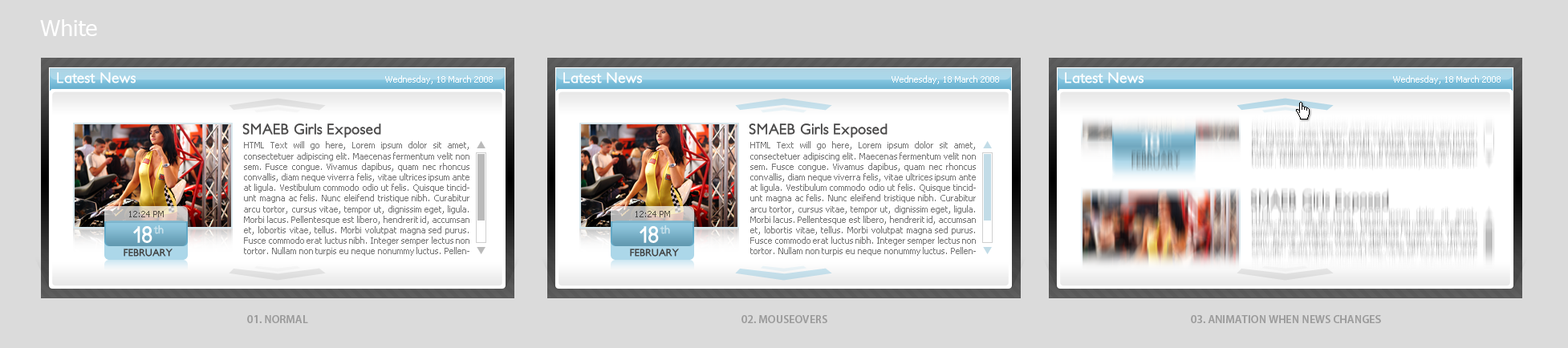
<style>
.page{position:relative;width:1568px;height:348px;background:#dbdbdb}
.page>*{position:absolute;margin:0}
.t1{font:22.5px "Tahoma";color:#ffffff}
.t2{font:14.4px "PetitaBold";color:#ffffff}
.t3{font:8.8px "Tahoma";color:#ffffff}
.t4{font:14.4px "PetitaBold";color:#494848}
.t5{font:8.8px "Tahoma";color:#777777}
.t6{font:8.8px "Tahoma";color:#564f47}
.t7{font:22.5px "PetitaBold";color:#ffffff}
.t8{font:11.2px "PetitaBold";color:#c9e1eb}
.t9{font:9.6px "PetitaBold";color:#3d3d3d}
.t10{font:11.2px "MyriadPro-Semibold";color:#9a9a9a}
</style>
<div class="page">
<p class="t1" style="left:40px;top:19px;width:57px;height:17px">White</p>
<p class="t2" style="left:57px;top:72px;width:79px;height:11px">Latest News</p>
<p class="t3" style="left:385px;top:75px;width:108px;height:9px">Wednesday, 18 March 2008</p>
<p class="t2" style="left:563px;top:72px;width:79px;height:11px">Latest News</p>
<p class="t3" style="left:892px;top:75px;width:107px;height:9px">Wednesday, 18 March 2008</p>
<p class="t2" style="left:1065px;top:72px;width:79px;height:11px">Latest News</p>
<p class="t3" style="left:1393px;top:75px;width:108px;height:9px">Wednesday, 18 March 2008</p>
<p class="t4" style="left:242px;top:124px;width:139px;height:14px">SMAEB Girls Exposed</p>
<p class="t4" style="left:749px;top:124px;width:139px;height:14px">SMAEB Girls Exposed</p>
<p class="t5" style="left:244px;top:141px;width:225px;height:115px;text-align:justify">HTML Text will go here, Lorem ipsum dolor sit amet, consectetuer adipiscing elit. Maecenas fermentum velit non sem. Fusce congue. Vivamus dapibus, quam nec rhoncus convallis, diam neque viverra felis, vitae ultrices ipsum ante at ligula. Vestibulum commodo odio ut felis. Quisque tincidunt magna ac felis. Nunc eleifend tristique nibh. Curabitur arcu tortor, cursus vitae, tempor ut, dignissim eget, ligula. Morbi lacus. Pellentesque est libero, hendrerit id, accumsan et, lobortis vitae, tellus. Morbi volutpat magna sed purus. Fusce commodo erat luctus nibh. Integer semper lectus non tortor. Nullam non turpis eu neque nonummy luctus. Pellentesque lobortis, eros eu tristique fringilla, nibh lectus mattis elit, eget lacinia justo sapien id nibh.</p>
<p class="t5" style="left:750px;top:141px;width:226px;height:115px;text-align:justify">HTML Text will go here, Lorem ipsum dolor sit amet, consectetuer adipiscing elit. Maecenas fermentum velit non sem. Fusce congue. Vivamus dapibus, quam nec rhoncus convallis, diam neque viverra felis, vitae ultrices ipsum ante at ligula. Vestibulum commodo odio ut felis. Quisque tincidunt magna ac felis. Nunc eleifend tristique nibh. Curabitur arcu tortor, cursus vitae, tempor ut, dignissim eget, ligula. Morbi lacus. Pellentesque est libero, hendrerit id, accumsan et, lobortis vitae, tellus. Morbi volutpat magna sed purus. Fusce commodo erat luctus nibh. Integer semper lectus non tortor. Nullam non turpis eu neque nonummy luctus. Pellentesque lobortis, eros eu tristique fringilla, nibh lectus mattis elit, eget lacinia justo sapien id nibh.</p>
<p class="t6" style="left:129px;top:211px;width:35px;height:6px">12:24 PM</p>
<p class="t6" style="left:636px;top:211px;width:34px;height:6px">12:24 PM</p>
<p class="t7" style="left:133px;top:226px;width:19px;height:17px">18</p>
<p class="t8" style="left:153px;top:225px;width:11px;height:9px">th</p>
<p class="t7" style="left:640px;top:226px;width:19px;height:17px">18</p>
<p class="t8" style="left:660px;top:225px;width:10px;height:9px">th</p>
<p class="t9" style="left:124px;top:249px;width:49px;height:8px">FEBRUARY</p>
<p class="t9" style="left:630px;top:249px;width:49px;height:8px">FEBRUARY</p>
<p class="t10" style="left:247px;top:315px;width:61px;height:8px">01. NORMAL</p>
<p class="t10" style="left:741px;top:315px;width:86px;height:8px">02. MOUSEOVERS</p>
<p class="t10" style="left:1191px;top:315px;width:190px;height:8px">03. ANIMATION WHEN NEWS CHANGES</p>
</div>
